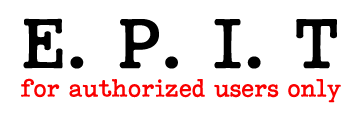
<style>
.page{position:relative;width:360px;height:114px;background:#ffffff}
.page>*{position:absolute;margin:0}
.t1{font:24px "Coronette";letter-spacing:-0.025em;color:#fa0000}
.t2{font:72px "Coronette";color:#000000;font-weight:bold}
</style>
<div class="page">
<p class="t1" style="left:21px;top:18px;width:320px;height:85px;text-align:center"><span class="t2">E. P. I. T<br></span>for authorized users only</p>
</div>
